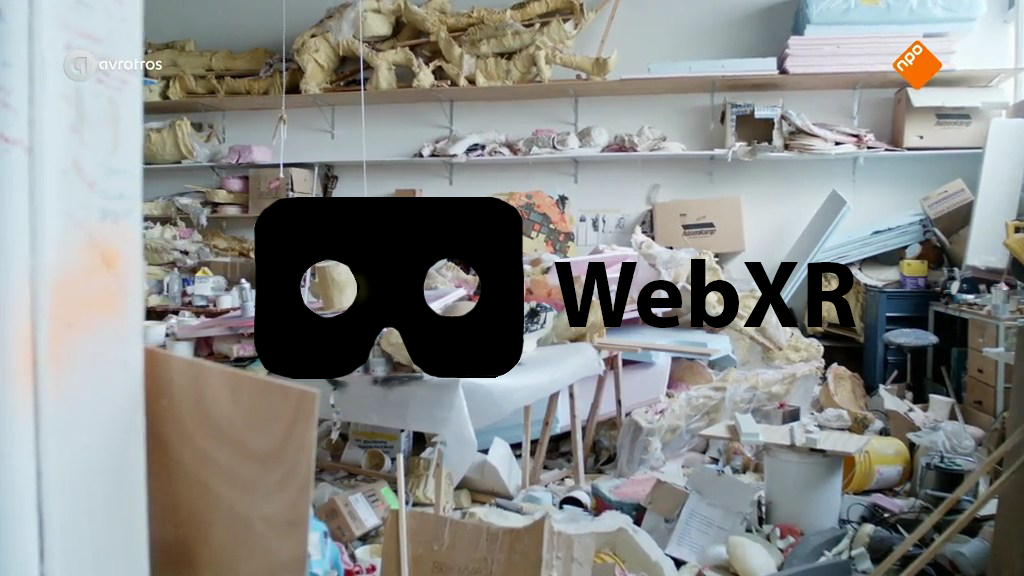
<style>
.page{position:relative;width:1024px;height:576px}
.page>*{position:absolute;margin:0}
.t1{font:96px "MyriadPro-Bold";color:#000000}
</style>
<div class="page">
<p class="t1" style="left:554px;top:259px;width:302px;height:69px">WebXR</p>
</div>
